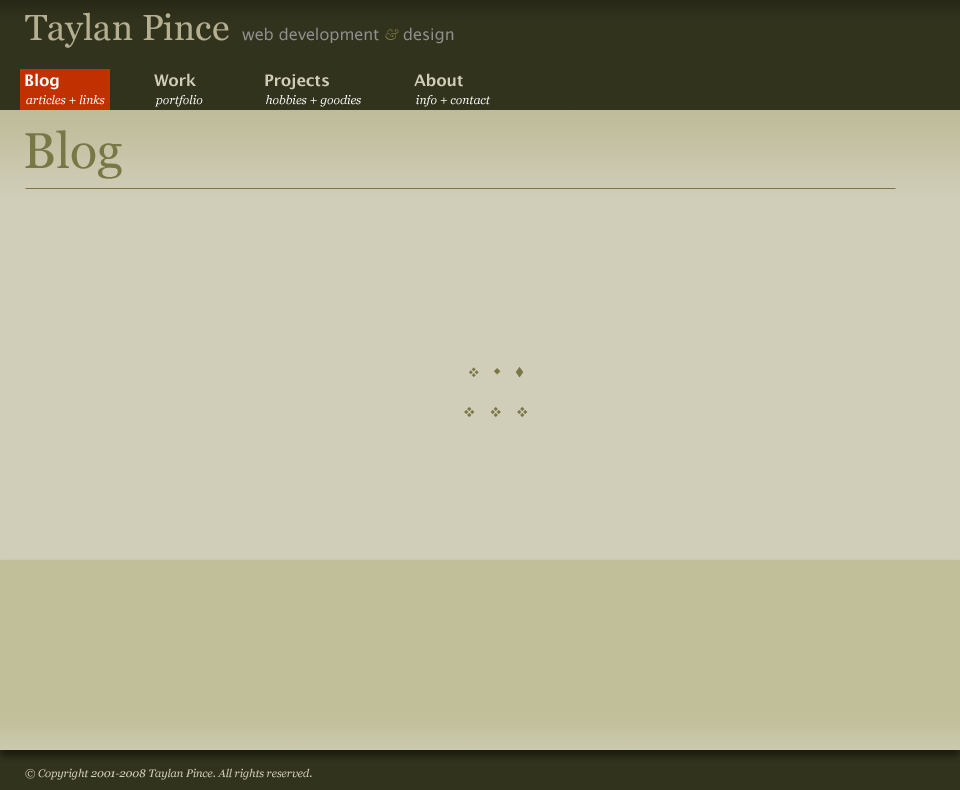
<style>
.page{position:relative;width:960px;height:790px;background:#d0cdb8}
.page>*{position:absolute;margin:0}
.t1{font:36px "Georgia";color:#b4af91}
.t2{font:16px "LucidaGrande";color:#8f8f8f}
.t3{font:16px "Baskerville-Italic";color:#787746}
.t4{font:16px "LucidaGrande-Bold";color:#ffffff}
.t5{font:16px "LucidaGrande-Bold";color:#d0cdb8}
.t6{font:12px "Georgia-Italic";color:#ffffff}
.t7{font:50px "Georgia";color:#787746}
.t8{font:11px "Georgia-Italic";color:#d0cdb8}
</style>
<div class="page">
<p class="t1" style="left:25px;top:12px;width:204px;height:36px">Taylan Pince</p>
<p class="t2" style="left:242px;top:27px;width:212px;height:17px">web development <span class="t3">&amp;</span> design</p>
<p class="t4" style="left:25px;top:73px;width:34px;height:17px">Blog</p>
<p class="t5" style="left:154px;top:73px;width:42px;height:14px">Work</p>
<p class="t5" style="left:265px;top:74px;width:64px;height:16px">Projects</p>
<p class="t5" style="left:414px;top:73px;width:49px;height:14px">About</p>
<p class="t6" style="left:26px;top:95px;width:79px;height:10px">articles + links</p>
<p class="t6" style="left:154px;top:95px;width:49px;height:12px">portfolio</p>
<p class="t6" style="left:266px;top:95px;width:95px;height:12px">hobbies + goodies</p>
<p class="t6" style="left:416px;top:95px;width:75px;height:12px">info + contact</p>
<p class="t7" style="left:25px;top:130px;width:97px;height:49px">Blog</p>
<p class="t8" style="left:25px;top:768px;width:287px;height:12px">© Copyright 2001-2008 Taylan Pince. All rights reserved.</p>
</div>
